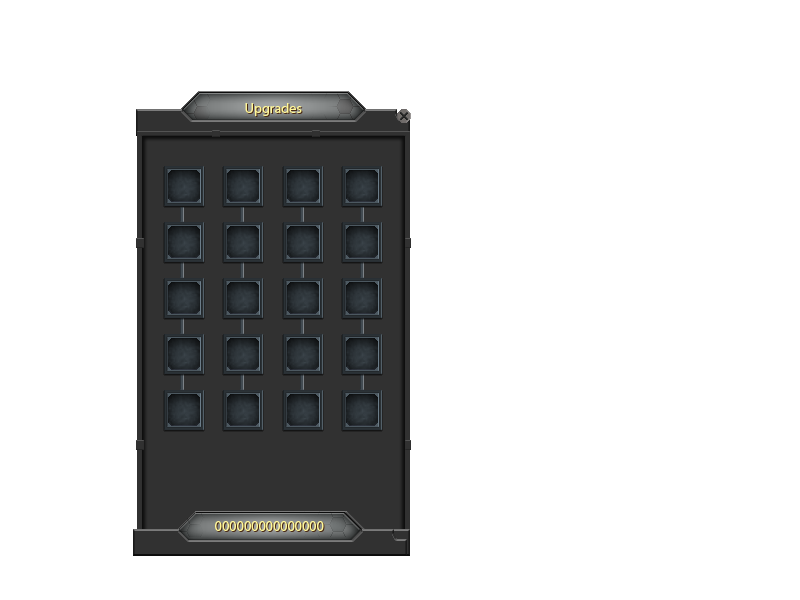
<style>
.page{position:relative;width:800px;height:600px;background:#ffffff}
.page>*{position:absolute;margin:0}
.t1{font:14.2px "MyriadPro-Regular";color:#fff799}
</style>
<div class="page">
<p class="t1" style="left:245px;top:103px;width:57px;height:13px">Upgrades</p>
<p class="t1" style="left:215px;top:521px;width:109px;height:10px">000000000000000</p>
</div>
